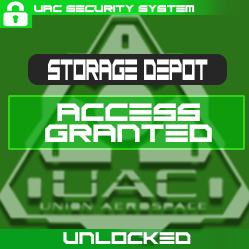
<style>
.page{position:relative;width:249px;height:249px;background:#2b7318}
.page>*{position:absolute;margin:0}
.t1{font:6.8px "ScifiAdventure";color:#ffffff}
.t2{font:20.5px "ScifiAdventure";color:#ffffff;scale:0.46 1}
.t3{font:17.5px "ScifiAdventure";color:#ffffff}
.t4{font:11.7px "ScifiAdventure";color:#ffffff}
</style>
<div class="page">
<p class="t1" style="left:34px;top:5px;width:161px;height:8px">UAC SECURITY SYSTEM</p>
<p class="t2" style="left:48px;top:59px;width:160px;height:21px">Storage Depot</p>
<p class="t3" style="left:45px;top:103px;width:167px;height:39px;text-align:center">ACCESS <br>GRANTED</p>
<p class="t4" style="left:63px;top:232px;width:128px;height:12px">uNLOCKED</p>
</div>
